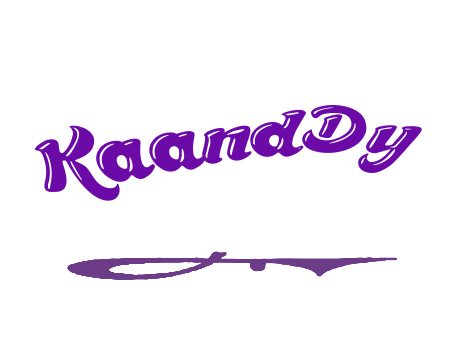
<style>
.page{position:relative;width:454px;height:340px;background:#ffffff}
.page>*{position:absolute;margin:0}
.t1{font:83.3px "ChocolateDealer-Bold";color:#6b0aa8}
</style>
<div class="page">
<p class="t1" style="left:35px;top:105px;width:387px;height:96px">KaandDy</p>
</div>
